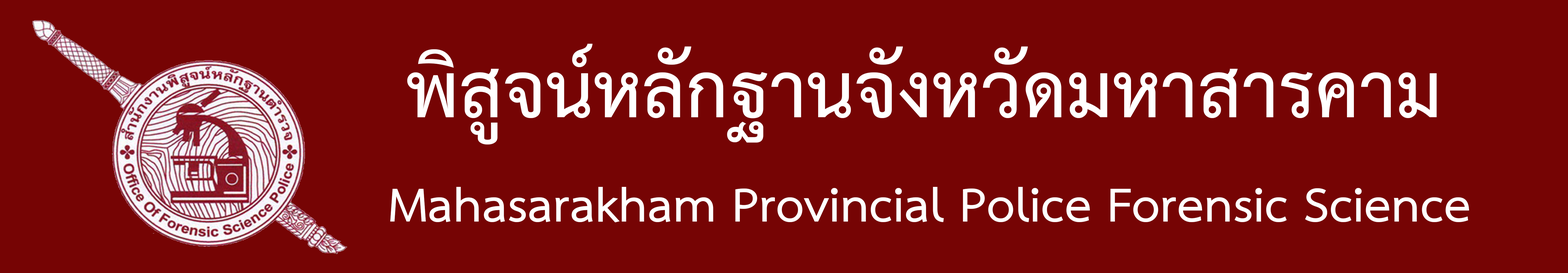
<style>
.page{position:relative;width:1568px;height:273px;background:#760404}
.page>*{position:absolute;margin:0}
.t1{font:110.1px "THSarabunPSK-Bold";color:#ffffff}
.t2{font:68.8px "THSarabunPSK-Bold";color:#ffffff}
</style>
<div class="page">
<p class="t1" style="left:407px;top:43px;width:1030px;height:101px">พิสูจน์หลักฐานจังหวัดมหาสารคาม</p>
<p class="t2" style="left:390px;top:187px;width:1079px;height:35px">Mahasarakham Provincial Police Forensic Science</p>
</div>
